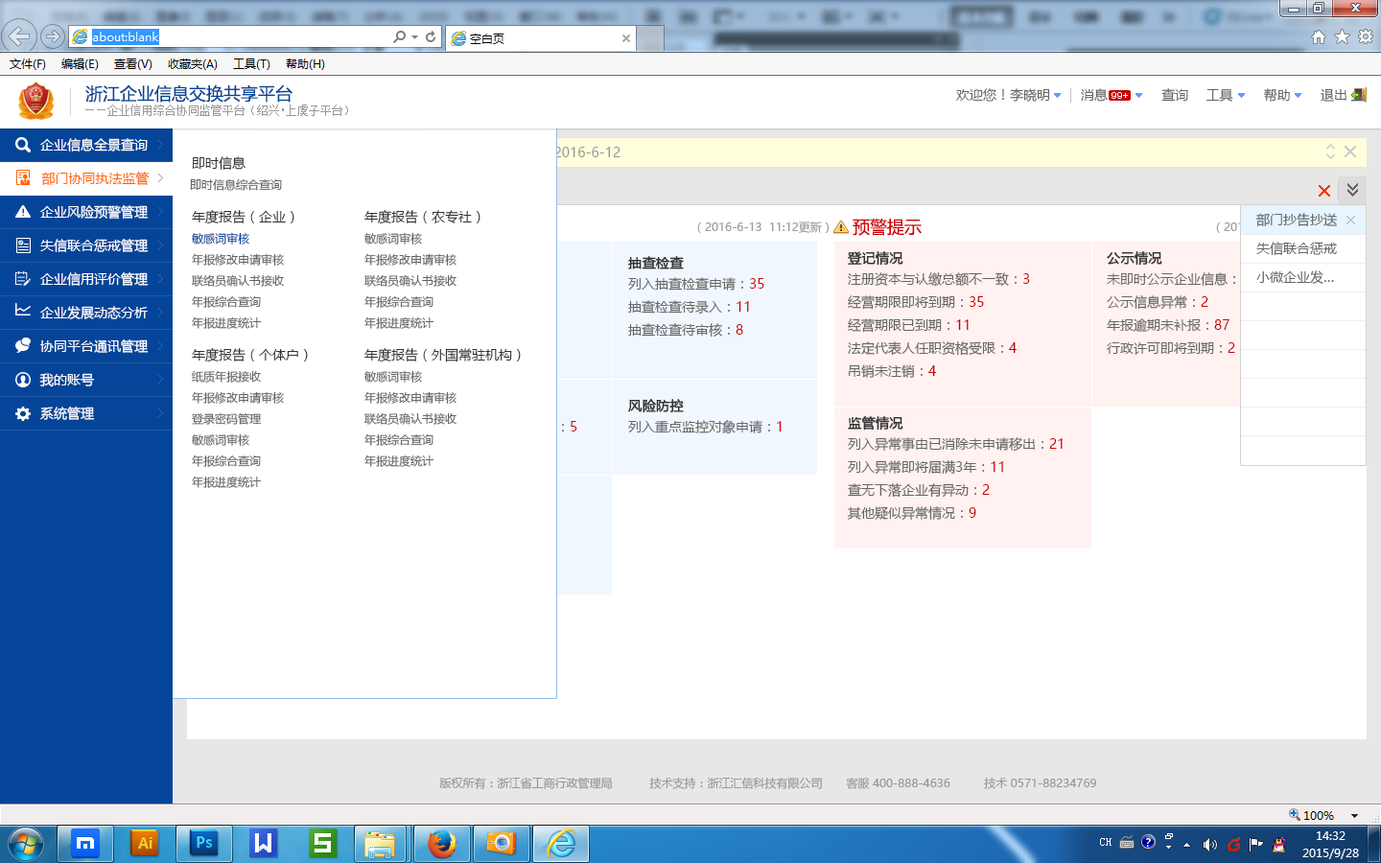
<style>
.page{position:relative;width:1381px;height:863px;background:#ffffff}
.page>*{position:absolute;margin:0}
.t1{font:17.3px "MicrosoftYaHei";color:#044599}
.t2{font:13.4px "MicrosoftYaHei";color:#666666}
.t3{font:9.6px "ArialMT";color:#ffffff}
.t4{font:11.5px "SimSun";color:#999999}
.t5{font:13.4px/33.6px "MicrosoftYaHei";color:#ffffff}
.t6{font:13.4px "MicrosoftYaHei";color:#333333}
.t7{font:13.4px "MicrosoftYaHei";color:#ff6600}
.t8{font:11.5px "MicrosoftYaHei";color:#666666}
.t9{font:11.5px "MicrosoftYaHei";color:#999999}
.t10{font:17.3px "MicrosoftYaHei";color:#cc0000}
.t11{font:13.4px/28.8px "MicrosoftYaHei";color:#666666}
.t12{font:11.5px/21.1px "MicrosoftYaHei";color:#666666}
.t13{font:11.5px/21.1px "MicrosoftYaHei";color:#044599}
.t14{font:13.4px "MicrosoftYaHei";color:#333333;font-weight:bold}
.t15{font:13.4px/23px "MicrosoftYaHei";color:#666666}
.t16{font:13.4px/23px "MicrosoftYaHei";color:#cc0000}
.t17{font:13.4px "MicrosoftYaHei";color:#cc0000}
</style>
<div class="page">
<p class="t1" style="left:85px;top:84px;width:208px;height:19px">浙江企业信息交换共享平台</p>
<p class="t2" style="left:956px;top:88px;width:94px;height:14px">欢迎您！李晓明</p>
<p class="t2" style="left:1081px;top:88px;width:27px;height:14px">消息</p>
<p class="t2" style="left:1162px;top:88px;width:26px;height:14px">查询</p>
<p class="t2" style="left:1207px;top:89px;width:27px;height:13px">工具</p>
<p class="t2" style="left:1264px;top:88px;width:26px;height:15px">帮助</p>
<p class="t2" style="left:1321px;top:88px;width:26px;height:14px">退出</p>
<p class="t3" style="left:1112px;top:92px;width:16px;height:7px">99+</p>
<p class="t4" style="left:85px;top:105px;width:263px;height:11px">——企业信用综合协同监管平台（绍兴•上虞子平台）</p>
<p class="t5" style="left:39px;top:138px;width:110px;height:282px">企业信息全景查询<br>部门协同执法监管<br>企业风险预警管理<br>失信联合惩戒管理<br>企业信用评价管理<br>企业发展动态分析<br>协同平台通讯管理<br>我的账号<br>系统管理</p>
<p class="t6" style="left:192px;top:156px;width:54px;height:14px">即时信息</p>
<p class="t7" style="left:41px;top:172px;width:109px;height:13px">部门协同执法监管</p>
<p class="t8" style="left:190px;top:178px;width:92px;height:13px">即时信息综合查询</p>
<p class="t6" style="left:192px;top:210px;width:102px;height:14px">年度报告（企业）</p>
<p class="t6" style="left:365px;top:210px;width:116px;height:14px">年度报告（农专社）</p>
<p class="t9" style="left:697px;top:222px;width:132px;height:11px">（2016-6-13  11:12更新）</p>
<p class="t10" style="left:853px;top:218px;width:69px;height:18px">预警提示</p>
<p class="t11" style="left:1257px;top:213px;width:80px;height:71px;text-align:justify">部门抄告抄送<br>失信联合惩戒<br>小微企业发…</p>
<p class="t12" style="left:191px;top:232px;width:93px;height:97px"><span class="t13">敏感词审核<br></span>年报修改申请审核<br>联络员确认书接收<br>年报综合查询<br>年报进度统计</p>
<p class="t12" style="left:364px;top:232px;width:93px;height:97px">敏感词审核<br>年报修改申请审核<br>联络员确认书接收<br>年报综合查询<br>年报进度统计</p>
<p class="t14" style="left:628px;top:256px;width:56px;height:14px">抽查检查</p>
<p class="t14" style="left:847px;top:251px;width:57px;height:15px">登记情况</p>
<p class="t14" style="left:1107px;top:251px;width:56px;height:15px">公示情况</p>
<p class="t15" style="left:628px;top:277px;width:136px;height:61px">列入抽查检查申请：<span class="t16">35<br></span>抽查检查待录入：<span class="t16">11<br></span>抽查检查待审核：<span class="t16">8</span></p>
<p class="t15" style="left:848px;top:272px;width:182px;height:106px">注册资本与认缴总额不一致：<span class="t16">3<br></span>经营期限即将到期：<span class="t16">35<br></span>经营期限已到期：<span class="t16">11<br></span>法定代表人任职资格受限：<span class="t16">4<br></span>吊销未注销：<span class="t16">4</span></p>
<p class="t15" style="left:1107px;top:272px;width:148px;height:83px">未即时公示企业信息：<span class="t16">11<br></span>公示信息异常：<span class="t16">2<br></span>年报逾期未补报：<span class="t16">87<br></span>行政许可即将到期：<span class="t16">2</span></p>
<p class="t6" style="left:192px;top:348px;width:116px;height:15px">年度报告（个体户）</p>
<p class="t6" style="left:365px;top:348px;width:156px;height:15px">年度报告（外国常驻机构）</p>
<p class="t12" style="left:191px;top:370px;width:93px;height:118px">纸质年报接收<br>年报修改申请审核<br>登录密码管理<br>敏感词审核<br>年报综合查询<br>年报进度统计</p>
<p class="t12" style="left:364px;top:370px;width:93px;height:97px">敏感词审核<br>年报修改申请审核<br>联络员确认书接收<br>年报综合查询<br>年报进度统计</p>
<p class="t14" style="left:628px;top:399px;width:56px;height:14px">风险防控</p>
<p class="t2" style="left:628px;top:420px;width:154px;height:14px">列入重点监控对象申请：<span class="t17">1</span></p>
<p class="t14" style="left:848px;top:416px;width:56px;height:15px">监管情况</p>
<p class="t15" style="left:847px;top:437px;width:216px;height:84px">列入异常事由已消除未申请移出：<span class="t16">21<br></span>列入异常即将届满3年：<span class="t16">11<br></span>查无下落企业有异动：<span class="t16">2<br></span>其他疑似异常情况：<span class="t16">9</span></p>
<p class="t9" style="left:439px;top:777px;width:657px;height:12px">版权所有：浙江省工商行政管理局           技术支持：浙江汇信科技有限公司       客服 400-888-4636          技术 0571-88234769</p>
</div>
